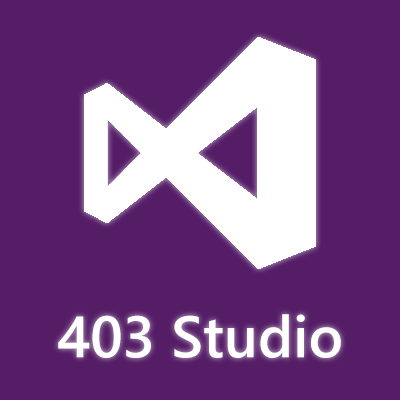
<style>
.page{position:relative;width:400px;height:400px;background:#541d66}
.page>*{position:absolute;margin:0}
.t1{font:58.3px "SegoeUI-Semibold";color:#ffffff}
</style>
<div class="page">
<p class="t1" style="left:58px;top:314px;width:283px;height:44px">403 Studio</p>
</div>
